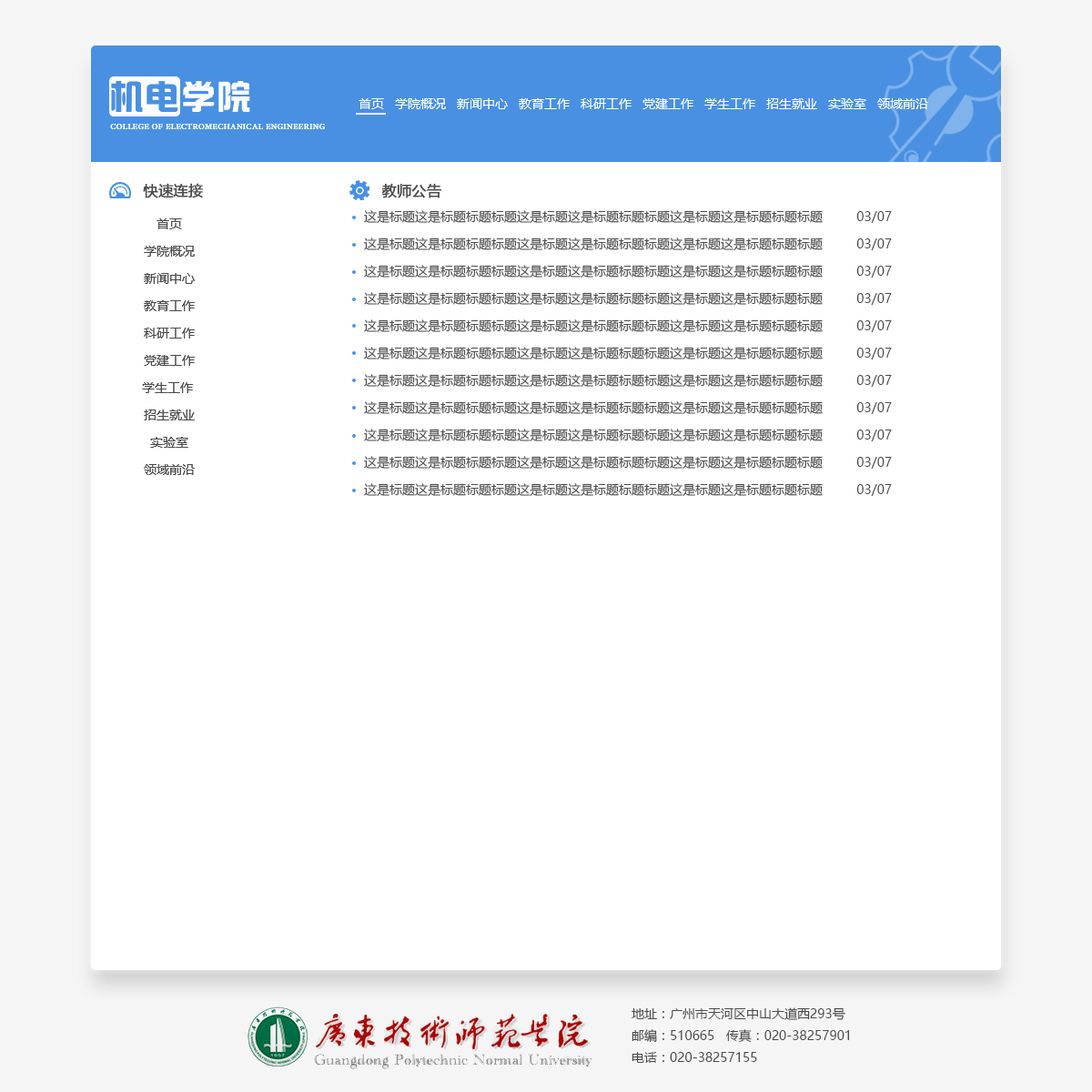
<style>
.page{position:relative;width:1092px;height:1092px;background:#ffffff}
.page>*{position:absolute;margin:0}
.t1{font:12.7px "MicrosoftYaHei";color:#fafbfc;font-variant:small-caps}
.t2{font:10.9px "MinionPro-Regular";color:#fafbfc;font-variant:small-caps}
.t3{font:14.6px "MicrosoftYaHei";color:#4a4a4a;font-weight:bold}
.t4{font:12.7px/27.3px "MicrosoftYaHei";color:#4a4a4a;font-variant:small-caps}
.t5{font:12.7px/27.3px "MicrosoftYaHei";color:#4a4a4a}
.t6{font:12.7px/21.8px "MicrosoftYaHei";color:#4a4a4a}
</style>
<div class="page">
<p class="t1" style="left:359px;top:98px;width:569px;height:11px">首页   学院概况   新闻中心   教育工作   科研工作   党建工作   学生工作   招生就业   实验室   领域前沿</p>
<p class="t2" style="left:110px;top:123px;width:215px;height:6px">college of electromechanical engineering</p>
<p class="t3" style="left:143px;top:183px;width:60px;height:15px">快速连接</p>
<p class="t3" style="left:381px;top:183px;width:61px;height:15px">教师公告</p>
<p class="t4" style="left:142px;top:218px;width:53px;height:257px;text-align:center">首页<br>学院概况<br>新闻中心<br>教育工作<br>科研工作<br>党建工作<br>学生工作 <br>招生就业<br>实验室<br>领域前沿</p>
<p class="t5" style="left:364px;top:210px;width:528px;height:286px">这是标题这是标题标题标题这是标题这是标题标题标题这是标题这是标题标题标题         03/07<br>这是标题这是标题标题标题这是标题这是标题标题标题这是标题这是标题标题标题         03/07<br>这是标题这是标题标题标题这是标题这是标题标题标题这是标题这是标题标题标题         03/07<br>这是标题这是标题标题标题这是标题这是标题标题标题这是标题这是标题标题标题         03/07<br>这是标题这是标题标题标题这是标题这是标题标题标题这是标题这是标题标题标题         03/07<br>这是标题这是标题标题标题这是标题这是标题标题标题这是标题这是标题标题标题         03/07<br>这是标题这是标题标题标题这是标题这是标题标题标题这是标题这是标题标题标题         03/07<br>这是标题这是标题标题标题这是标题这是标题标题标题这是标题这是标题标题标题         03/07<br>这是标题这是标题标题标题这是标题这是标题标题标题这是标题这是标题标题标题         03/07<br>这是标题这是标题标题标题这是标题这是标题标题标题这是标题这是标题标题标题         03/07<br>这是标题这是标题标题标题这是标题这是标题标题标题这是标题这是标题标题标题         03/07</p>
<p class="t6" style="left:632px;top:1007px;width:218px;height:56px">地址：广州市天河区中山大道西293号<br>邮编：510665   传真：020-38257901<br>电话：020-38257155</p>
</div>
